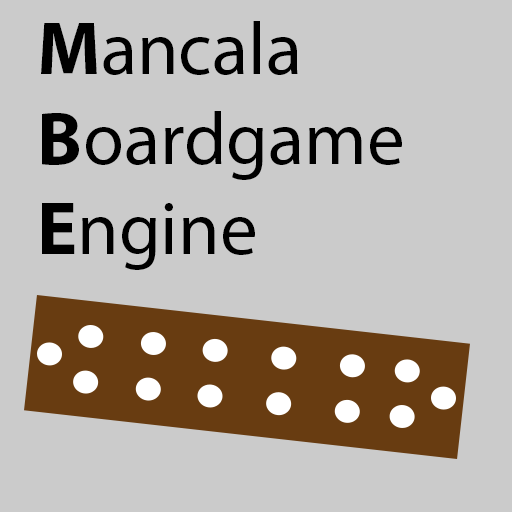
<style>
.page{position:relative;width:512px;height:512px;background:#cbcbcb}
.page>*{position:absolute;margin:0}
.t1{font:75px "MyriadPro-Regular";color:#000000}
.t2{font:75px "MyriadPro-Bold";color:#000000}
</style>
<div class="page">
<p class="t1" style="left:41px;top:21px;width:361px;height:249px"><span class="t2">M</span>ancala<br><span class="t2">B</span>oardgame<br><span class="t2">E</span>ngine</p>
</div>
